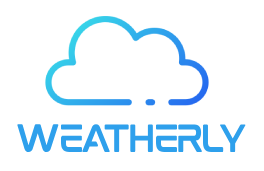
<style>
.page{position:relative;width:264px;height:171px;background:#ffffff}
.page>*{position:absolute;margin:0}
.t1{font:40px "Mokoto-Regular";color:#2ea0ec}
</style>
<div class="page">
<p class="t1" style="left:17px;top:124px;width:229px;height:29px">WEATHERLY</p>
</div>
